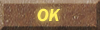
<style>
.page{position:relative;width:100px;height:30px}
.page>*{position:absolute;margin:0}
.t1{font:18px "FranklinGothic-DemiItalic";color:#fff061}
</style>
<div class="page">
<p class="t1" style="left:37px;top:8px;width:24px;height:14px">OK</p>
</div>
